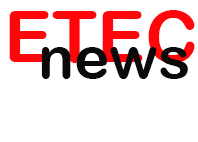
<style>
.page{position:relative;width:198px;height:142px;background:#ffffff}
.page>*{position:absolute;margin:0}
.t1{font:72px "ArialRoundedMTBold";color:#ff070a}
.t2{font:60px "ArialRoundedMTBold";color:#0b0a0a}
</style>
<div class="page">
<p class="t1" style="left:9px;top:10px;width:186px;height:53px">ETEC</p>
<p class="t2" style="left:41px;top:47px;width:147px;height:32px">news</p>
</div>
